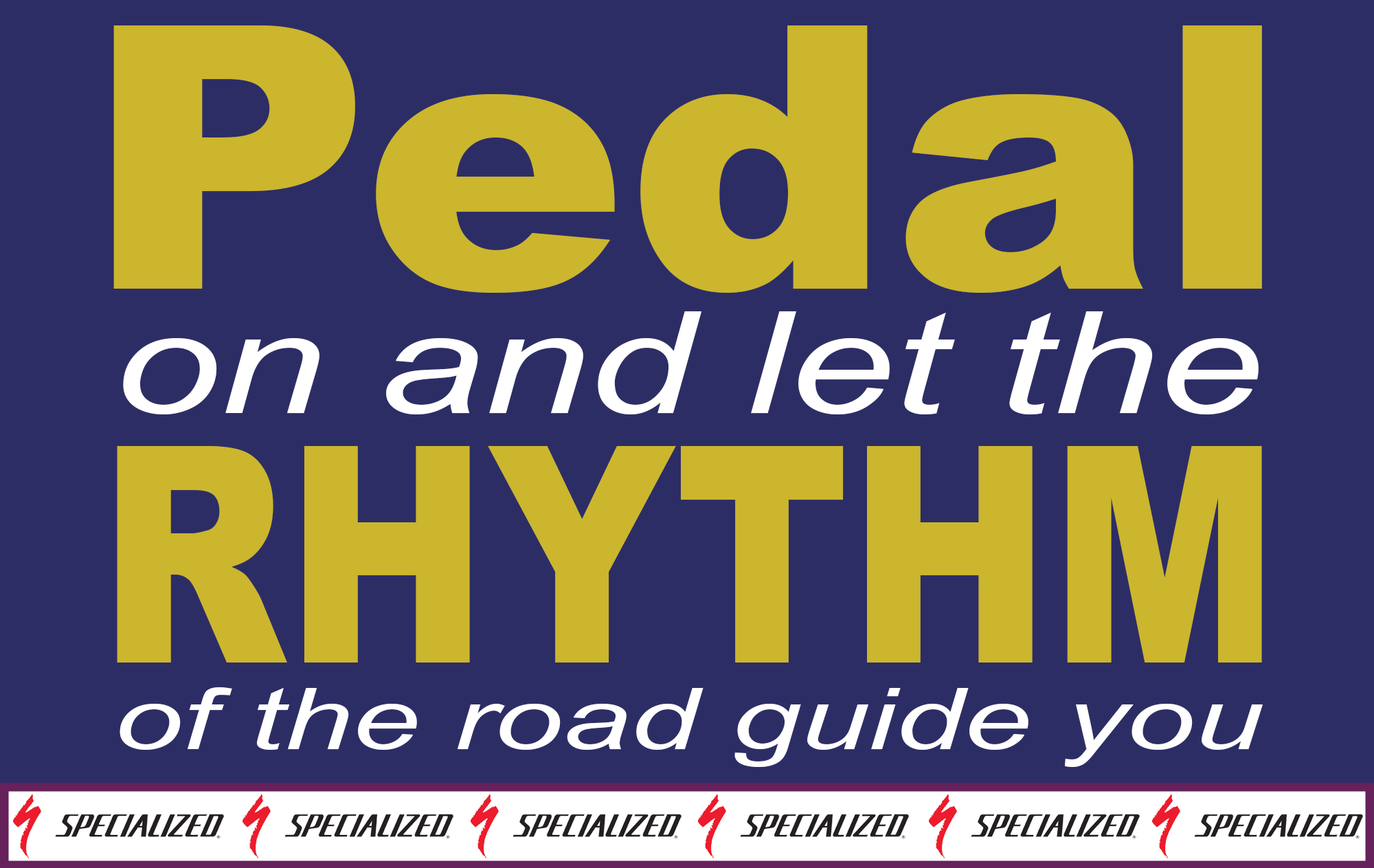
<style>
.page{position:relative;width:1374px;height:868px;background:#2d2d66}
.page>*{position:absolute;margin:0}
.t1{font:367.6px "Arial-Black";color:#cbb62d;scale:1.08 1}
.t2{font:142.3px "Arial-ItalicMT";color:#ffffff;scale:1.33 1}
.t3{font:302.1px "Arial-Black";color:#cbb62d;scale:0.8 1}
.t4{font:85.4px "Arial-ItalicMT";color:#ffffff;scale:1.43 1}
</style>
<div class="page">
<p class="t1" style="left:113px;top:25px;width:1149px;height:268px">Pedal</p>
<p class="t2" style="left:123px;top:311px;width:1136px;height:103px">on and let the</p>
<p class="t3" style="left:117px;top:446px;width:1145px;height:216px">RHYTHM</p>
<p class="t4" style="left:120px;top:687px;width:1143px;height:80px">of the road guide you</p>
</div>
